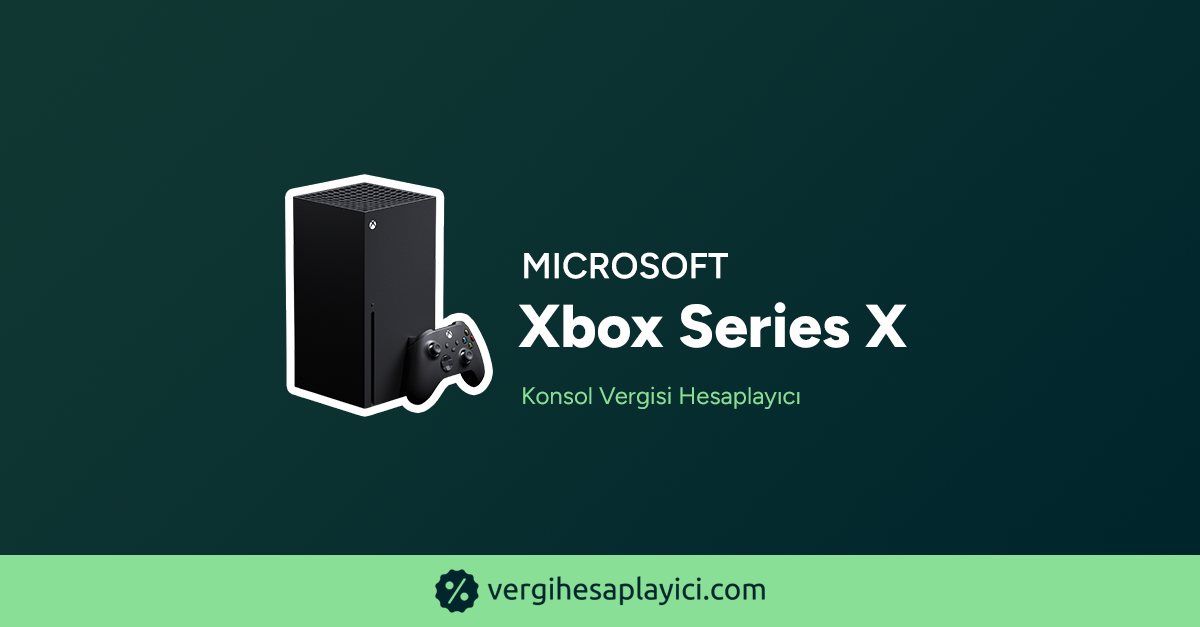
<style>
.page{position:relative;width:1200px;height:627px}
.page>*{position:absolute;margin:0}
.t1{font:36px "Figtree-SemiBold";color:#ffffff;text-transform:uppercase;font-weight:bold}
.t2{font:60.3px "Figtree-ExtraBold";color:#ffffff;font-weight:bold}
.t3{font:24px "Figtree-Regular";color:#88df95;font-weight:bold}
</style>
<div class="page">
<p class="t1" style="left:524px;top:252px;width:204px;height:27px">Microsoft</p>
<p class="t2" style="left:518px;top:302px;width:389px;height:46px">Xbox Series X</p>
<p class="t3" style="left:523px;top:386px;width:277px;height:23px">Konsol Vergisi Hesaplayıcı</p>
</div>
